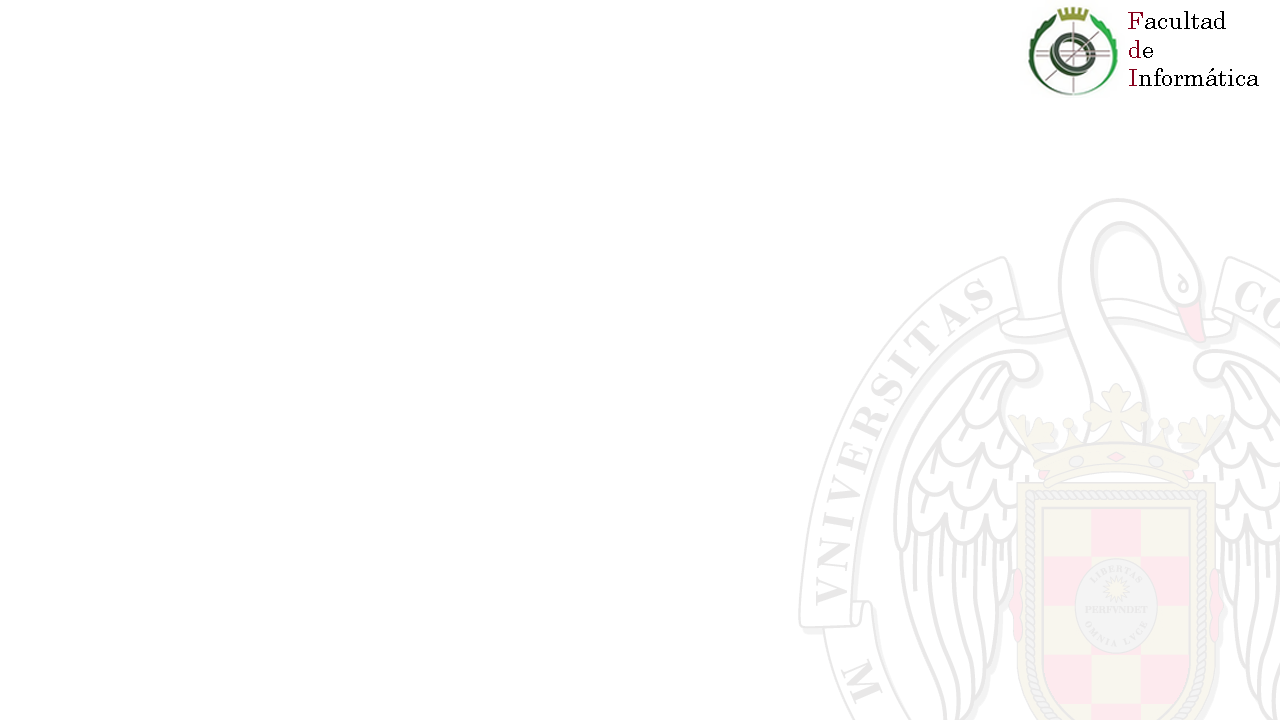
<style>
.page{position:relative;width:1280px;height:720px;background:#ffffff}
.page>*{position:absolute;margin:0}
.t1{font:24px "Century";color:#000000}
.t2{font:24px "Century";color:#85001b}
</style>
<div class="page">
<p class="t1" style="left:1128px;top:11px;width:131px;height:75px"><span class="t2">F</span>acultad<br><span class="t2">d</span>e<br><span class="t2">I</span>nformática</p>
</div>
